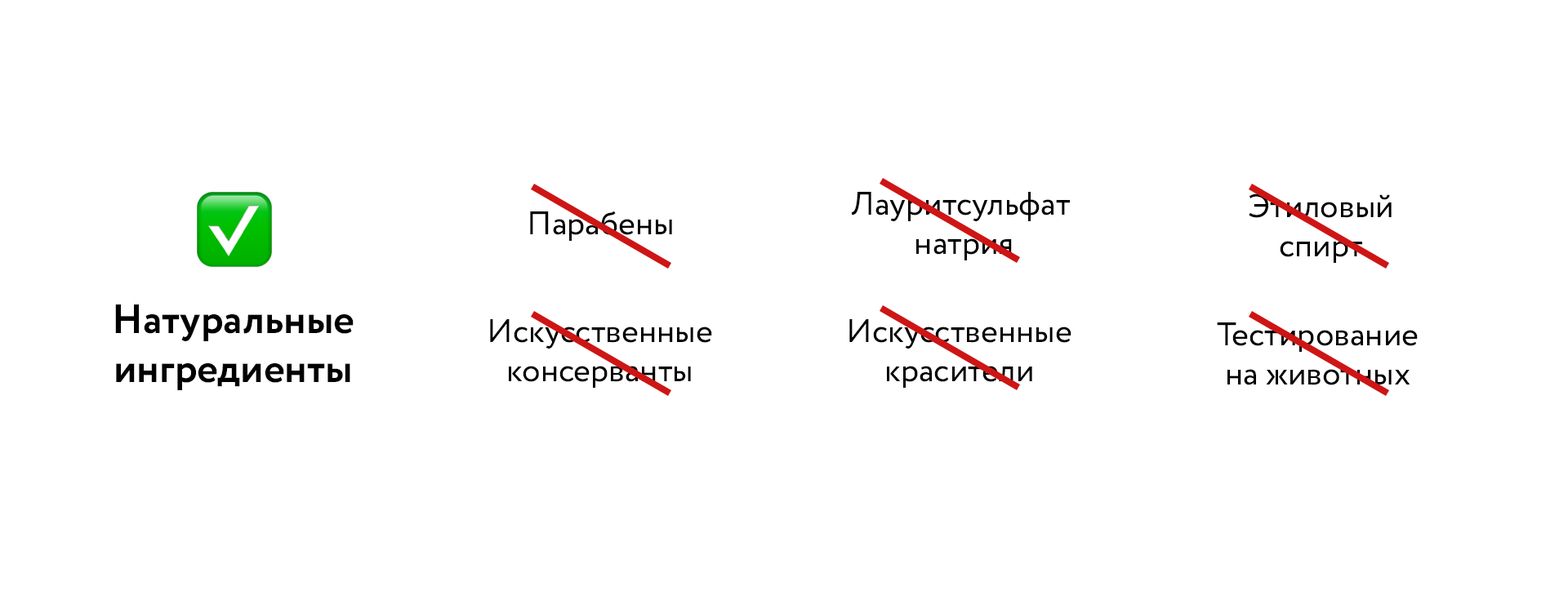
<style>
.page{position:relative;width:1568px;height:591px;background:#ffffff}
.page>*{position:absolute;margin:0}
.t1{font:32.7px "Circe-Regular";color:#000000}
.t2{font:40.8px "Circe-Bold";color:#000101}
</style>
<div class="page">
<p class="t1" style="left:852px;top:192px;width:218px;height:69px;text-align:center">Лауритсульфат <br>натрия</p>
<p class="t1" style="left:1249px;top:194px;width:143px;height:69px;text-align:center">Этиловый<br>спирт</p>
<p class="t1" style="left:530px;top:211px;width:142px;height:30px">Парабены</p>
<p class="t2" style="left:115px;top:305px;width:239px;height:85px;text-align:center">Натуральные<br>ингредиенты</p>
<p class="t1" style="left:490px;top:319px;width:222px;height:69px;text-align:center">Искусственные<br>консерванты</p>
<p class="t1" style="left:849px;top:319px;width:222px;height:69px;text-align:center">Искусственные<br>красители</p>
<p class="t1" style="left:1217px;top:323px;width:201px;height:62px;text-align:center">Тестирование<br>на животных</p>
</div>
